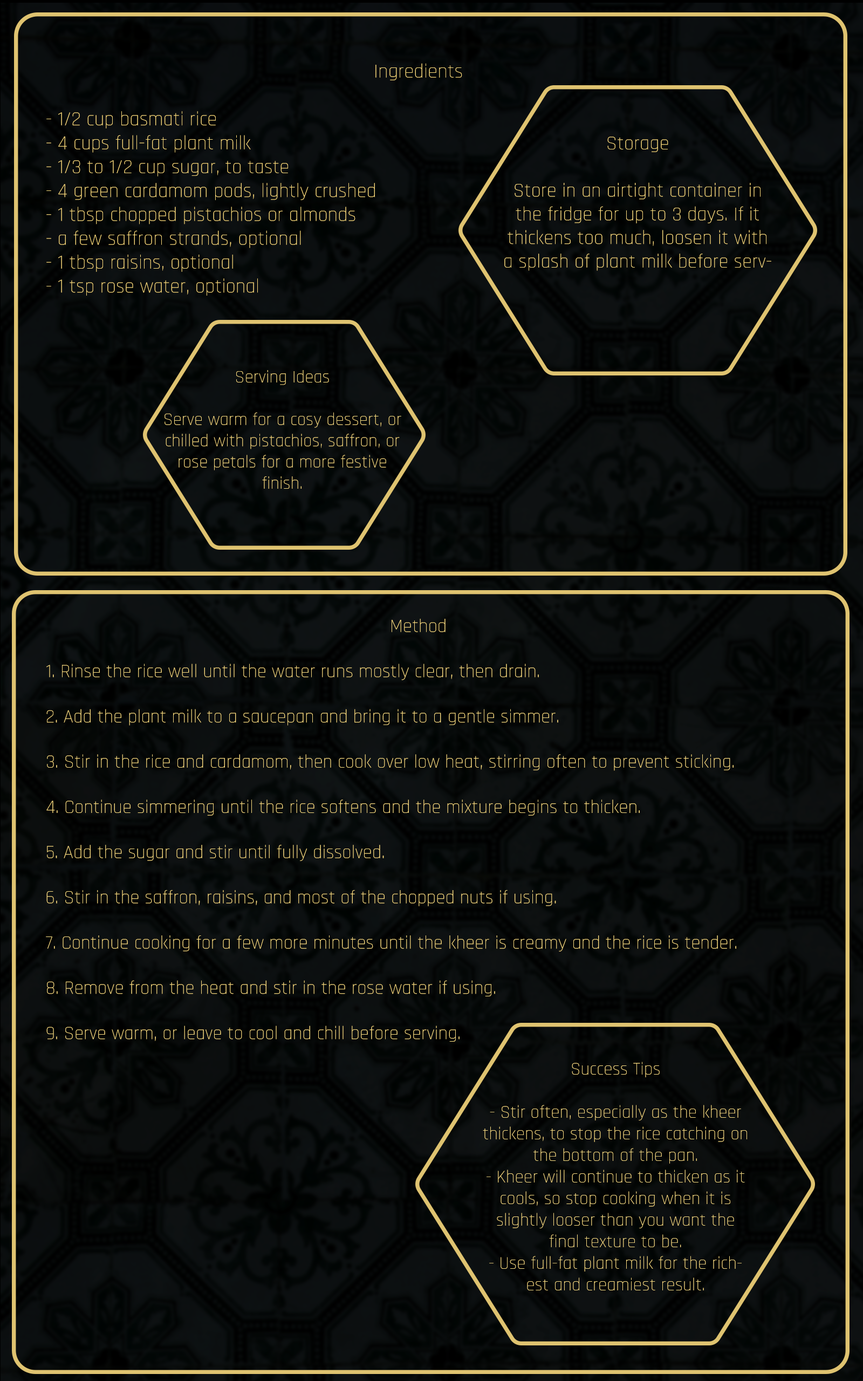
<style>
.page{position:relative;width:863px;height:1381px}
.page>*{position:absolute;margin:0}
.t1{font:19.9px "Rajdhani-Light";color:#ffde7e}
.t2{font:19.7px "Rajdhani-Light";color:#ffdf80}
.t3{font:17.7px "Rajdhani-Light";color:#ffe083}
.t4{font:18.9px "Rajdhani-Light";color:#ffe083}
.t5{font:18px "Rajdhani-Light";color:#ffe085}
</style>
<div class="page">
<p class="t1" style="left:46px;top:63px;width:416px;height:233px;text-align:center">Ingredients<br><br>- 1/2 cup basmati rice<br>- 4 cups full-fat plant milk<br>- 1/3 to 1/2 cup sugar, to taste<br>- 4 green cardamom pods, lightly crushed<br>- 1 tbsp chopped pistachios or almonds<br>- a few saffron strands, optional<br>- 1 tbsp raisins, optional<br>- 1 tsp rose water, optional</p>
<p class="t2" style="left:504px;top:137px;width:268px;height:134px;text-align:center">Storage<br><br>Store in an airtight container in the fridge for up to 3 days. If it thickens too much, loosen it with a splash of plant milk before serving.</p>
<p class="t3" style="left:165px;top:370px;width:236px;height:119px;text-align:center">Serving Ideas<br><br>Serve warm for a cosy dessert, or chilled with pistachios, saffron, or rose petals for a more festive finish.</p>
<p class="t4" style="left:46px;top:619px;width:690px;height:423px;text-align:center">Method<br><br>1. Rinse the rice well until the water runs mostly clear, then drain.<br><br>2. Add the plant milk to a saucepan and bring it to a gentle simmer.<br><br>3. Stir in the rice and cardamom, then cook over low heat, stirring often to prevent sticking.<br><br>4. Continue simmering until the rice softens and the mixture begins to thicken.<br><br>5. Add the sugar and stir until fully dissolved.<br><br>6. Stir in the saffron, raisins, and most of the chopped nuts if using.<br><br>7. Continue cooking for a few more minutes until the kheer is creamy and the rice is tender.<br><br>8. Remove from the heat and stir in the rose water if using.<br><br>9. Serve warm, or leave to cool and chill before serving.</p>
<p class="t5" style="left:483px;top:1062px;width:264px;height:229px;text-align:center">Success Tips<br><br>- Stir often, especially as the kheer thickens, to stop the rice catching on the bottom of the pan.<br>- Kheer will continue to thicken as it cools, so stop cooking when it is slightly looser than you want the final texture to be.<br>- Use full-fat plant milk for the richest and creamiest result.</p>
</div>
